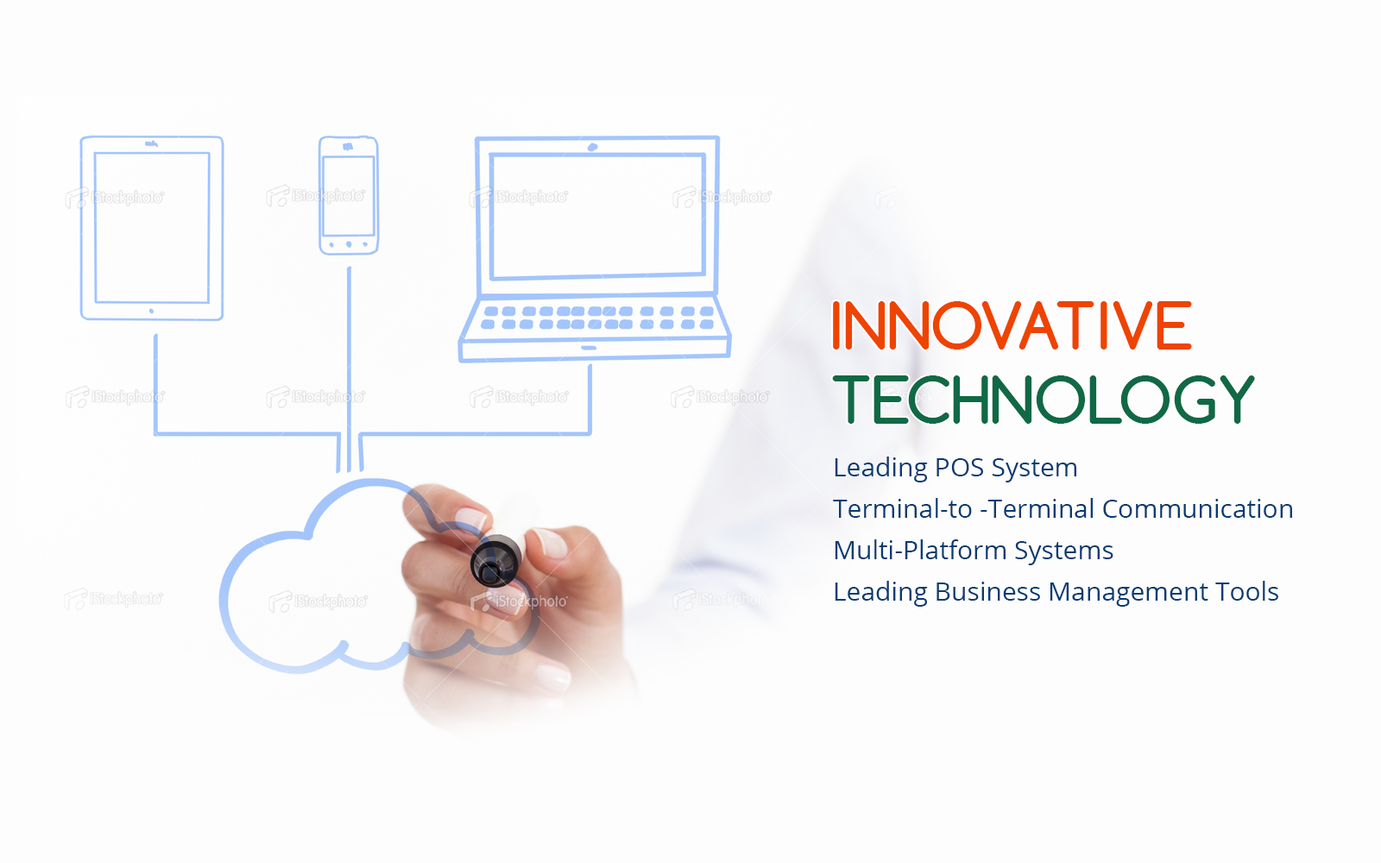
<style>
.page{position:relative;width:1381px;height:863px;background:#fdfdfd}
.page>*{position:absolute;margin:0}
.t1{font:62.2px "Comfortaa-Bold";color:#ee4400}
.t2{font:62.2px "Comfortaa-Bold";color:#106945}
.t3{font:25.9px/41.4px "OpenSans";color:#063b73}
</style>
<div class="page">
<p class="t1" style="left:833px;top:301px;width:359px;height:49px">INNOVATIVE</p>
<p class="t2" style="left:832px;top:376px;width:423px;height:48px">TECHNOLOGY</p>
<p class="t3" style="left:833px;top:457px;width:459px;height:150px">Leading POS System<br>Terminal-to -Terminal Communication<br>Multi-Platform Systems<br>Leading Business Management Tools</p>
</div>
